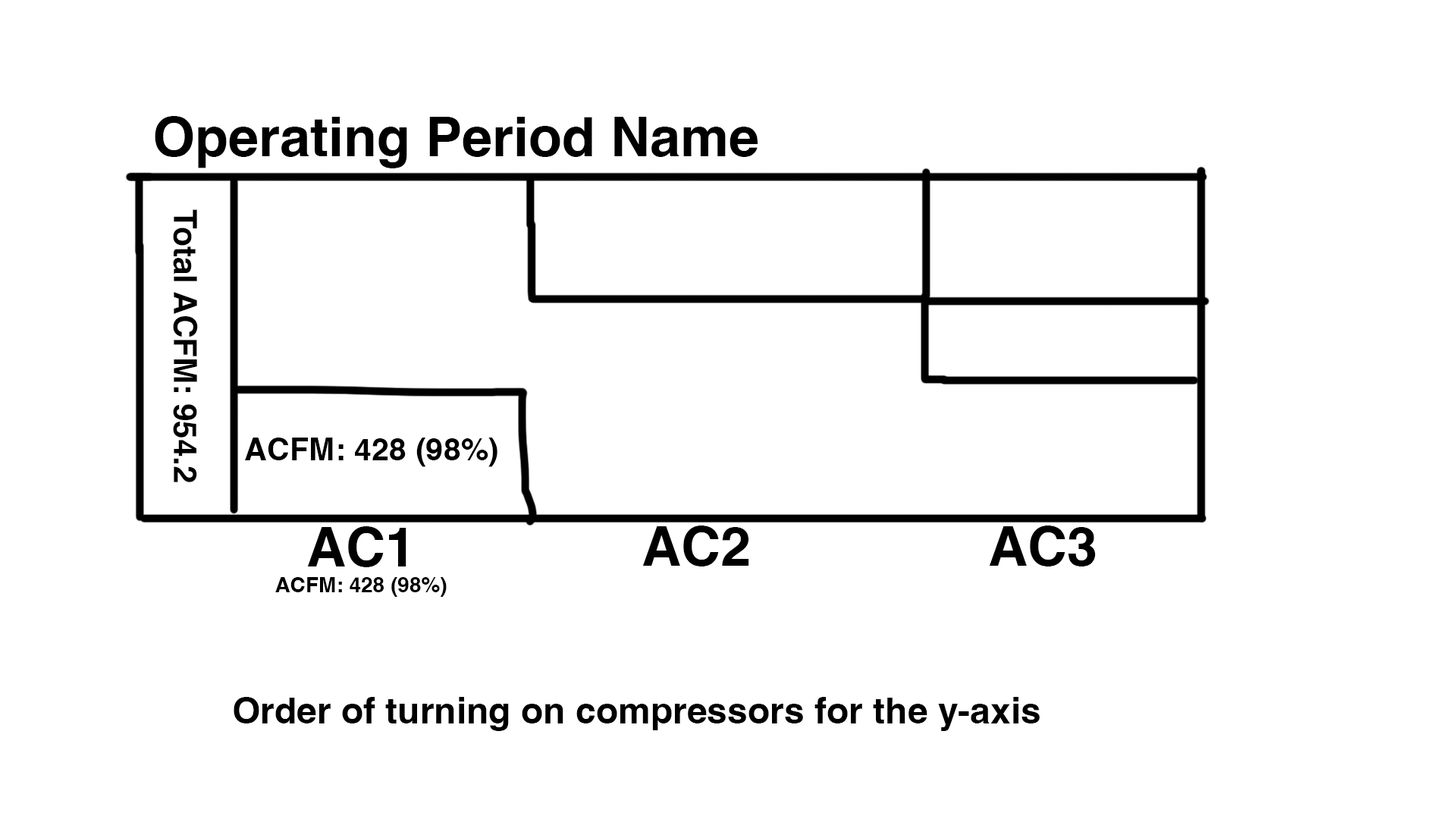
<style>
.page{position:relative;width:1456px;height:819px;background:#ffffff}
.page>*{position:absolute;margin:0}
.t1{font:54.6px "Helvetica-Bold";color:#000000}
.t2{font:32px "Helvetica-Bold";color:#000000}
.t3{font:31.4px "Helvetica-Bold";color:#000000}
.t4{font:21.2px "Helvetica-Bold";color:#000000}
.t5{font:36.4px "Helvetica-Bold";color:#000000}
</style>
<div class="page">
<p class="t1" style="left:155px;top:116px;width:603px;height:52px">Operating Period Name</p>
<p class="t2" style="left:173px;top:209px;width:25px;height:273px;rotate:90deg">Total ACFM: 954.2</p>
<p class="t3" style="left:245px;top:438px;width:252px;height:29px">ACFM: 428 (98%)</p>
<p class="t4" style="left:275px;top:526px;width:172px;height:71px;text-align:center"><span class="t1">AC1<br></span>ACFM: 428 (98%)</p>
<p class="t1" style="left:642px;top:526px;width:107px;height:40px">AC2</p>
<p class="t1" style="left:989px;top:526px;width:107px;height:40px">AC3</p>
<p class="t5" style="left:234px;top:697px;width:806px;height:34px">Order of turning on compressors for the y-axis</p>
</div>
